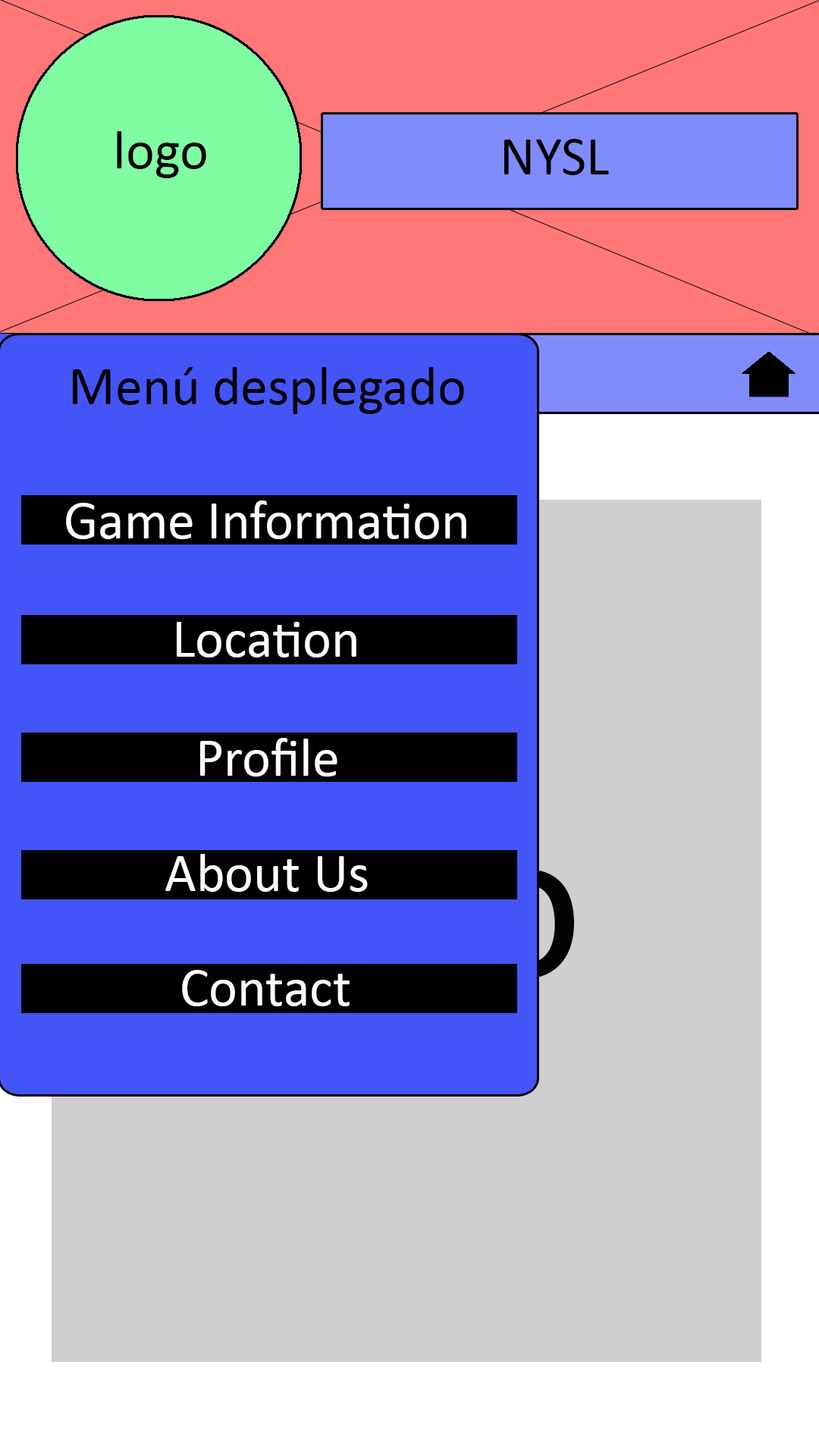
<style>
.page{position:relative;width:819px;height:1456px;background:#cfcfd2}
.page>*{position:absolute;margin:0}
.t1{font:54.6px "Calibri";color:#000000}
.t2{font:54.6px "Calibri";color:#ffffff}
</style>
<div class="page">
<p class="t1" style="left:73px;top:367px;width:391px;height:47px">Menú desplegado</p>
<p class="t2" style="left:66px;top:500px;width:400px;height:39px">Game Information</p>
<p class="t2" style="left:177px;top:622px;width:179px;height:35px">Location</p>
<p class="t2" style="left:200px;top:738px;width:137px;height:39px">Profile</p>
<p class="t2" style="left:165px;top:854px;width:203px;height:38px">About Us</p>
<p class="t2" style="left:182px;top:970px;width:168px;height:36px">Contact</p>
</div>
